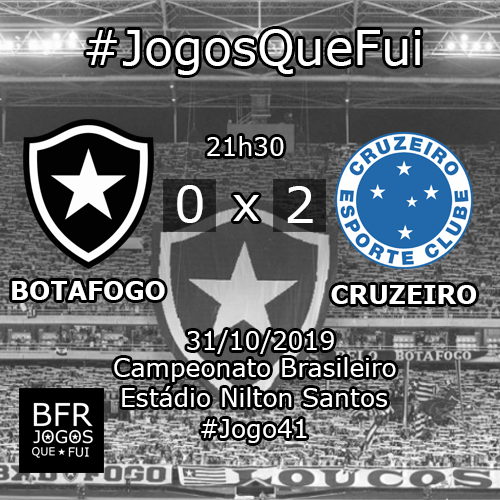
<style>
.page{position:relative;width:500px;height:500px}
.page>*{position:absolute;margin:0}
.t1{font:48px "Verdana";color:#ffffff}
.t2{font:25px "Verdana";color:#ffffff}
.t3{font:49.5px "Verdana";color:#ffffff}
.t4{font:25px "Verdana-Bold";color:#ffffff}
</style>
<div class="page">
<p class="t1" style="left:86px;top:29px;width:335px;height:46px">#JogosQueFui</p>
<p class="t2" style="left:207px;top:136px;width:77px;height:20px">21h30</p>
<p class="t3" style="left:177px;top:185px;width:26px;height:38px">0</p>
<p class="t1" style="left:233px;top:195px;width:26px;height:26px">x</p>
<p class="t3" style="left:287px;top:186px;width:26px;height:37px">2</p>
<p class="t4" style="left:12px;top:281px;width:153px;height:19px">BOTAFOGO</p>
<p class="t4" style="left:331px;top:285px;width:145px;height:19px">CRUZEIRO</p>
<p class="t2" style="left:187px;top:330px;width:147px;height:24px">31/10/2019</p>
<p class="t2" style="left:114px;top:357px;width:282px;height:25px">Campeonato Brasileiro</p>
<p class="t2" style="left:122px;top:386px;width:265px;height:21px">Estádio Nilton Santos</p>
<p class="t2" style="left:201px;top:419px;width:106px;height:24px">#Jogo41</p>
</div>
